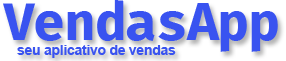
<style>
.page{position:relative;width:286px;height:61px;background:#3953f0}
.page>*{position:absolute;margin:0}
.t1{font:52px "FiraCode-Bold";letter-spacing:-0.025em;color:#3953f0}
.t2{font:14.2px "Arial-BoldMT";letter-spacing:-0.025em;color:#3953f0}
</style>
<div class="page">
<p class="t1" style="left:3px;top:0px;width:275px;height:52px">VendasApp</p>
<p class="t2" style="left:17px;top:45px;width:159px;height:13px">seu aplicativo de vendas</p>
</div>
